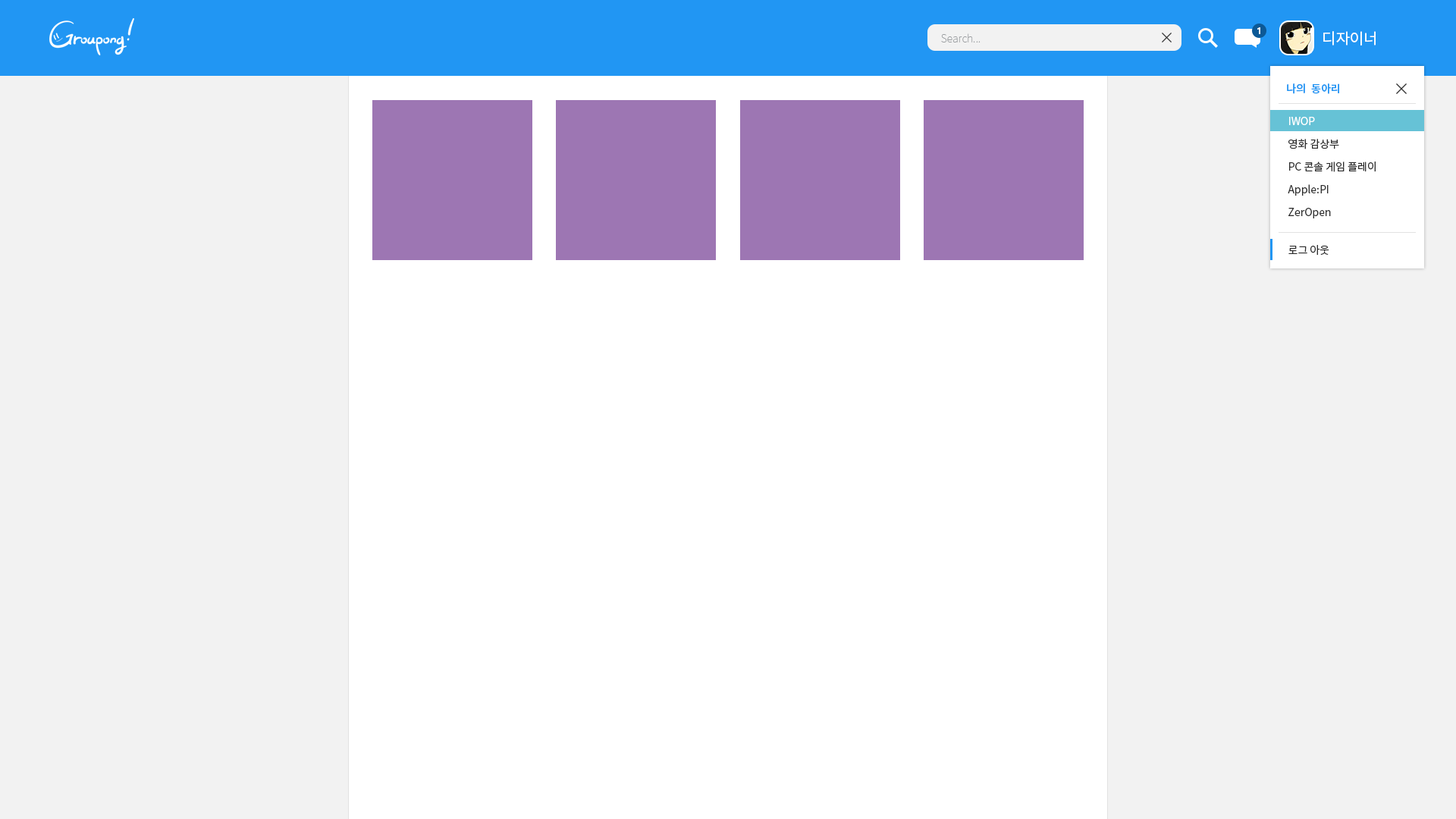
<style>
.page{position:relative;width:1456px;height:819px;background:#ffffff}
.page>*{position:absolute;margin:0}
.t1{font:9.9px "MalgunGothicBold";color:#ffffff}
.t2{font:10.6px "NotoSansCJKkr-Thin";color:#9b9ea1}
.t3{font:15.2px "NotoSansCJKkr-Regular";color:#ffffff}
.t4{font:10.6px "NotoSansMonoCJKkr-Bold";color:#2196f3}
.t5{font:10.6px "NotoSansCJKkr-Regular";color:#ffffff}
.t6{font:10.6px "NotoSansCJKkr-Regular";color:#2e2e2e}
</style>
<div class="page">
<p class="t1" style="left:1257px;top:27px;width:3px;height:7px">1</p>
<p class="t2" style="left:941px;top:33px;width:40px;height:9px">Search...</p>
<p class="t3" style="left:1323px;top:31px;width:53px;height:14px">디자이너</p>
<p class="t4" style="left:1287px;top:83px;width:52px;height:11px">나의 동아리</p>
<p class="t5" style="left:1289px;top:117px;width:26px;height:8px">IWOP</p>
<p class="t6" style="left:1288px;top:139px;width:51px;height:10px">영화 감상부</p>
<p class="t6" style="left:1289px;top:162px;width:87px;height:10px">PC 콘솔 게임 플레이</p>
<p class="t6" style="left:1288px;top:184px;width:41px;height:12px">Apple:PI</p>
<p class="t6" style="left:1288px;top:208px;width:43px;height:10px">ZerOpen</p>
<p class="t6" style="left:1288px;top:245px;width:41px;height:11px">로그 아웃</p>
</div>
